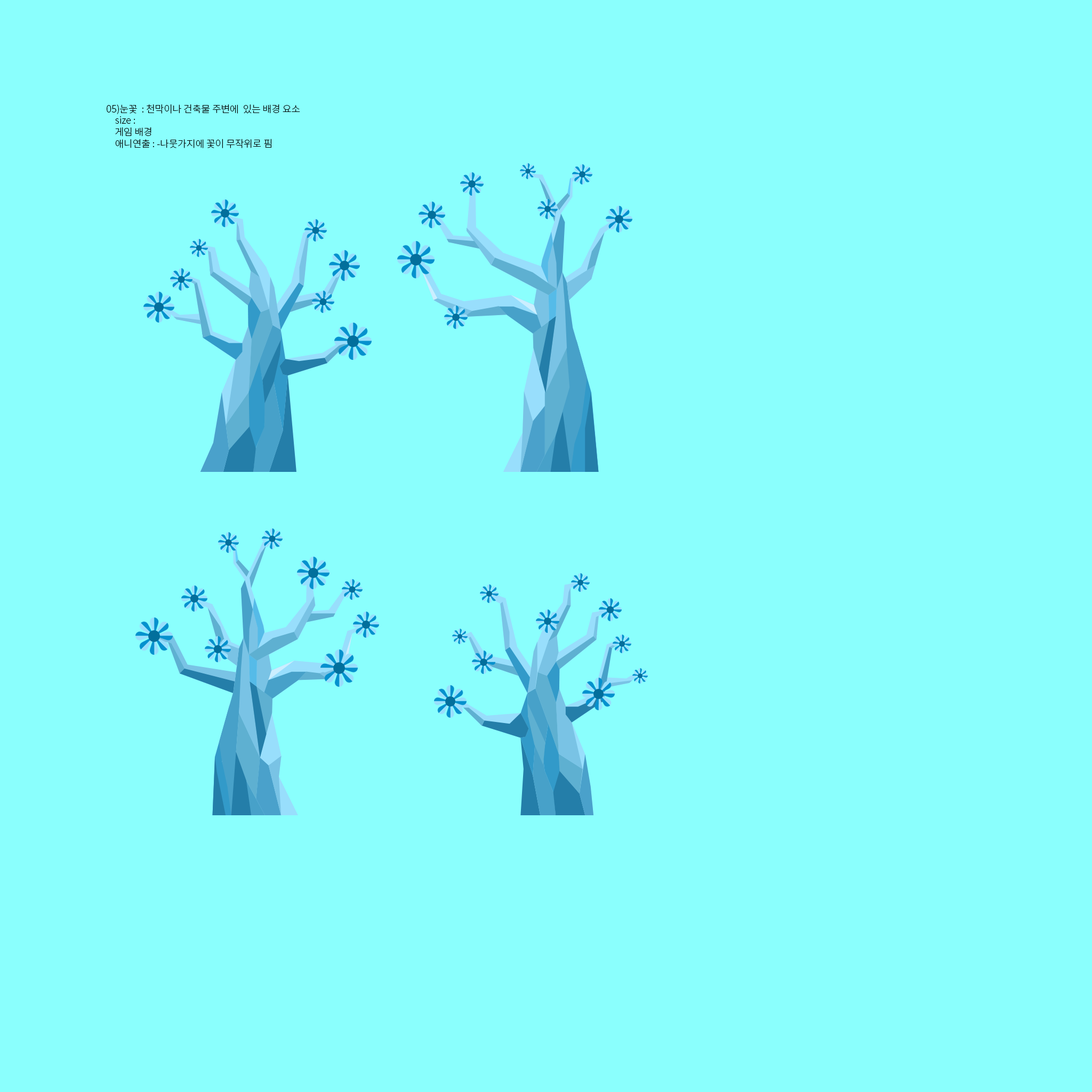
<style>
.page{position:relative;width:1092px;height:1092px;background:#8afffd}
.page>*{position:absolute;margin:0}
.t1{font:9.6px "NotoSansCJKkr-Light";color:#000000}
</style>
<div class="page">
<p class="t1" style="left:107px;top:104px;width:193px;height:44px">05)눈꽃  : 천막이나 건축물 주변에  있는 배경 요소  <br>    size : <br>    게임 배경<br>    애니연출 : -나뭇가지에 꽃이 무작위로 핌</p>
</div>
